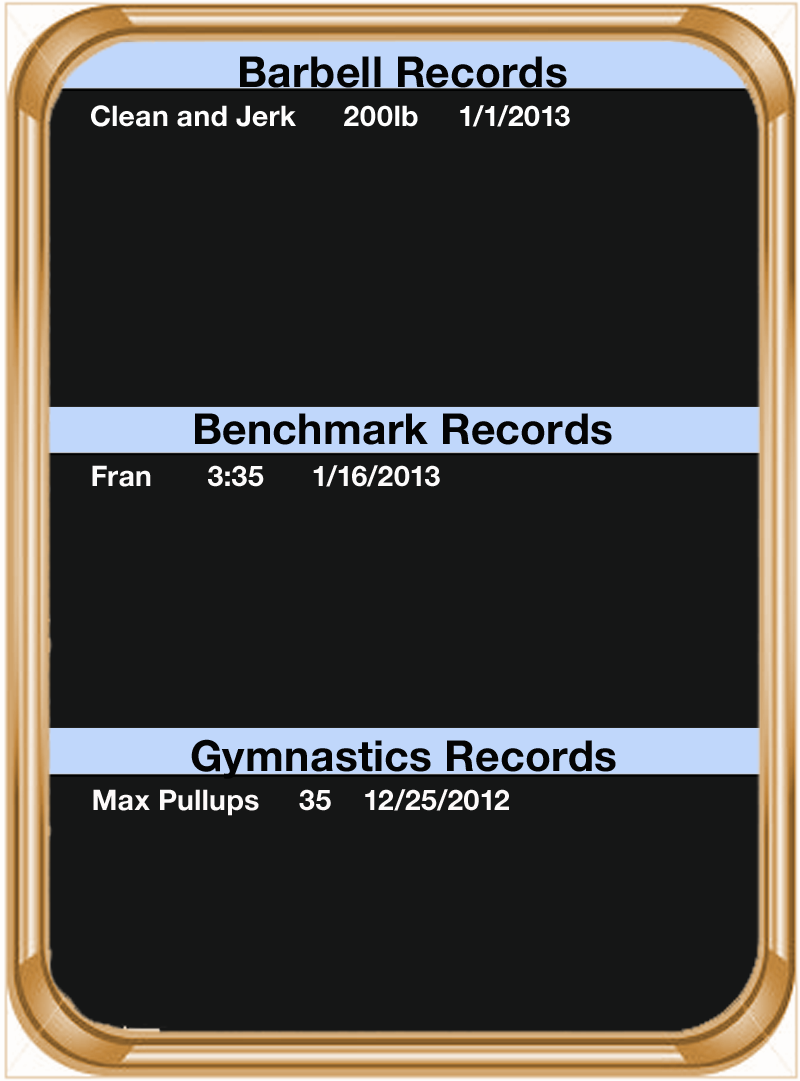
<style>
.page{position:relative;width:800px;height:1081px;background:#151616}
.page>*{position:absolute;margin:0}
.t1{font:42.9px "HelveticaNeue-Bold";color:#040404}
.t2{font:28.6px "HelveticaNeue-Bold";color:#fefefe}
.t3{font:42.9px "HelveticaNeue-Bold";color:#030303}
.t4{font:28.6px "HelveticaNeue-Bold";color:#fcfbfb}
.t5{font:28.6px "HelveticaNeue-Bold";color:#fdfafa}
</style>
<div class="page">
<p class="t1" style="left:240px;top:56px;width:327px;height:32px">Barbell Records</p>
<p class="t2" style="left:91px;top:105px;width:479px;height:22px">Clean and Jerk      200lb     1/1/2013</p>
<p class="t3" style="left:195px;top:413px;width:417px;height:32px">Benchmark Records</p>
<p class="t4" style="left:92px;top:465px;width:348px;height:22px">Fran       3:35      1/16/2013</p>
<p class="t1" style="left:191px;top:739px;width:425px;height:40px">Gymnastics Records</p>
<p class="t5" style="left:93px;top:789px;width:416px;height:27px">Max Pullups     35    12/25/2012</p>
</div>
